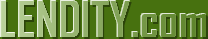
<style>
.page{position:relative;width:208px;height:39px;background:#47710f}
.page>*{position:absolute;margin:0}
.t1{font:48px "AgencyFB-Bold"}
</style>
<div class="page">
<p class="t1" style="left:0px;top:0px;width:206px;height:37px">LENDITY.com</p>
</div>
